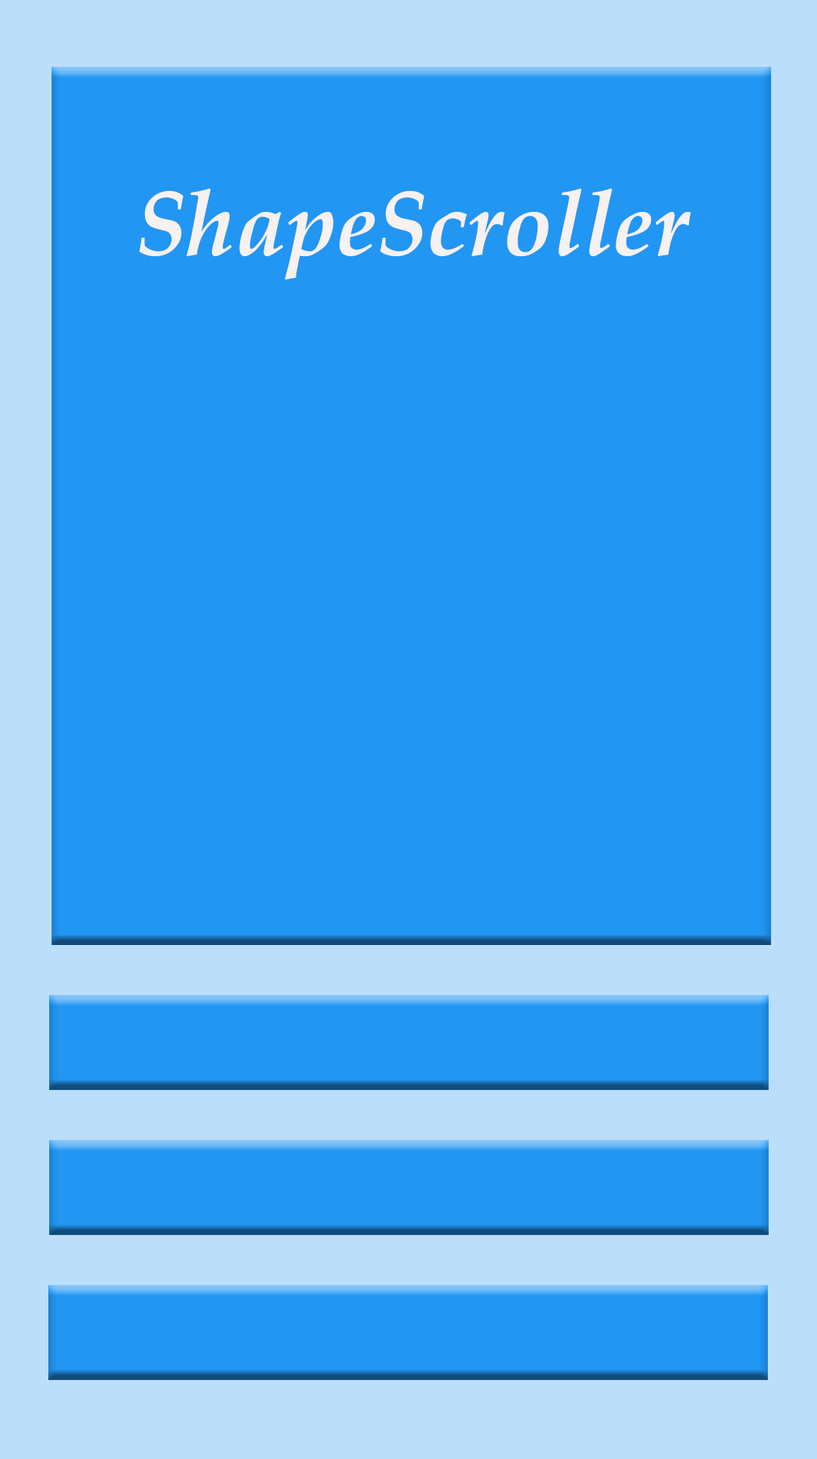
<style>
.page{position:relative;width:817px;height:1459px;background:#2196f3}
.page>*{position:absolute;margin:0}
.t1{font:90.6px "PalatinoLinotype-BoldItalic";color:#f7f1f1}
</style>
<div class="page">
<p class="t1" style="left:139px;top:189px;width:552px;height:91px">ShapeScroller</p>
</div>
